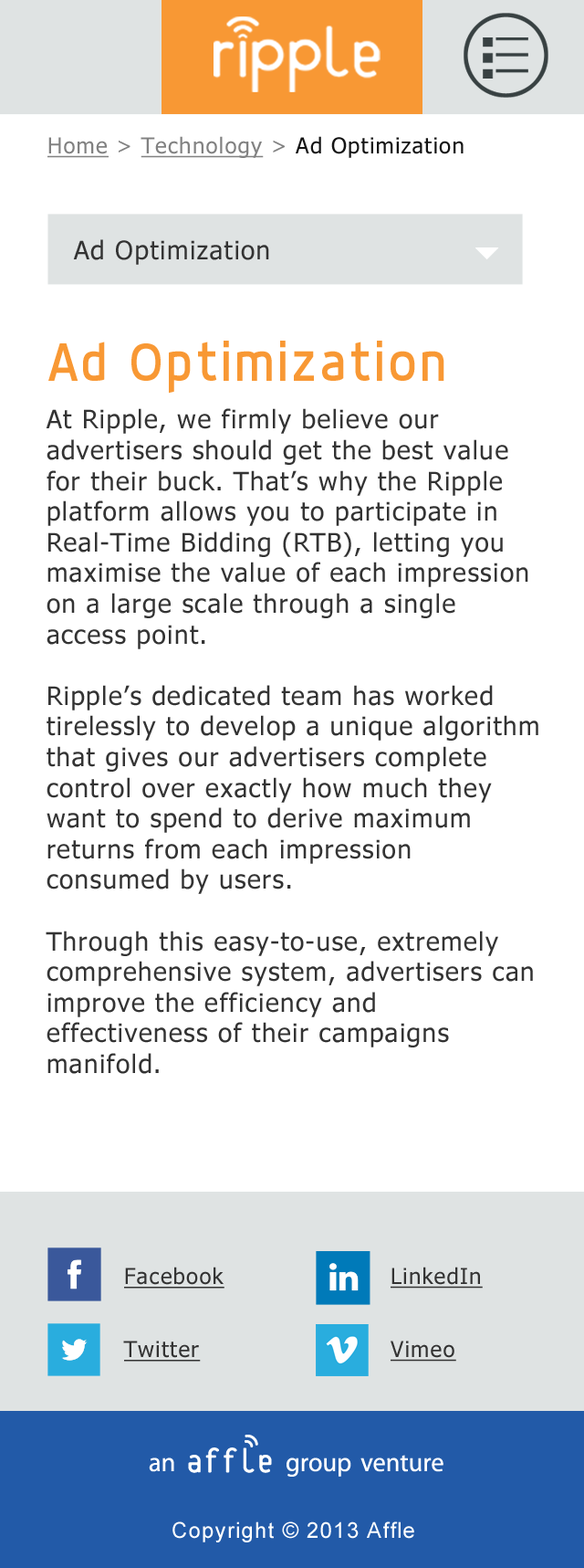
<style>
.page{position:relative;width:584px;height:1568px;background:#ffffff}
.page>*{position:absolute;margin:0}
.t1{font:21.9px "Tahoma";letter-spacing:0.05em;color:#141414}
.t2{font:21.9px "Tahoma";letter-spacing:0.05em;color:#818181;text-decoration:underline}
.t3{font:21.9px "Tahoma";letter-spacing:0.05em;color:#818181}
.t4{font:25.6px "Tahoma";letter-spacing:0.05em;color:#333333}
.t5{font:54.8px "DynoRegular";letter-spacing:0.05em;color:#f89834}
.t6{font:21.9px/73.1px "Tahoma";letter-spacing:0.05em;color:#333333;text-decoration:underline}
.t7{font:21.9px "ArialMT";letter-spacing:0.05em;color:#ffffff}
</style>
<div class="page">
<p class="t1" style="left:47px;top:136px;width:417px;height:22px"><span class="t2">Home</span><span class="t3"> &gt; </span><span class="t2">Technology</span><span class="t3"> &gt; </span>Ad Optimization</p>
<p class="t4" style="left:73px;top:239px;width:196px;height:26px">Ad Optimization</p>
<p class="t5" style="left:48px;top:341px;width:397px;height:53px">Ad Optimization</p>
<p class="t4" style="left:46px;top:408px;width:493px;height:666px">At Ripple, we firmly believe our advertisers should get the best value for their buck. That’s why the Ripple platform allows you to participate in Real-Time Bidding (RTB), letting you maximise the value of each impression on a large scale through a single access point.<br><br>Ripple’s dedicated team has worked tirelessly to develop a unique algorithm that gives our advertisers complete control over exactly how much they want to spend to derive maximum returns from each impression consumed by users.<br><br>Through this easy-to-use, extremely comprehensive system, advertisers can improve the efficiency and effectiveness of their campaigns manifold.</p>
<p class="t6" style="left:123px;top:1267px;width:102px;height:95px">Facebook<br>Twitter</p>
<p class="t6" style="left:391px;top:1267px;width:92px;height:95px">LinkedIn<br>Vimeo</p>
<p class="t7" style="left:173px;top:1521px;width:242px;height:21px">Copyright © 2013 Affle</p>
</div>
